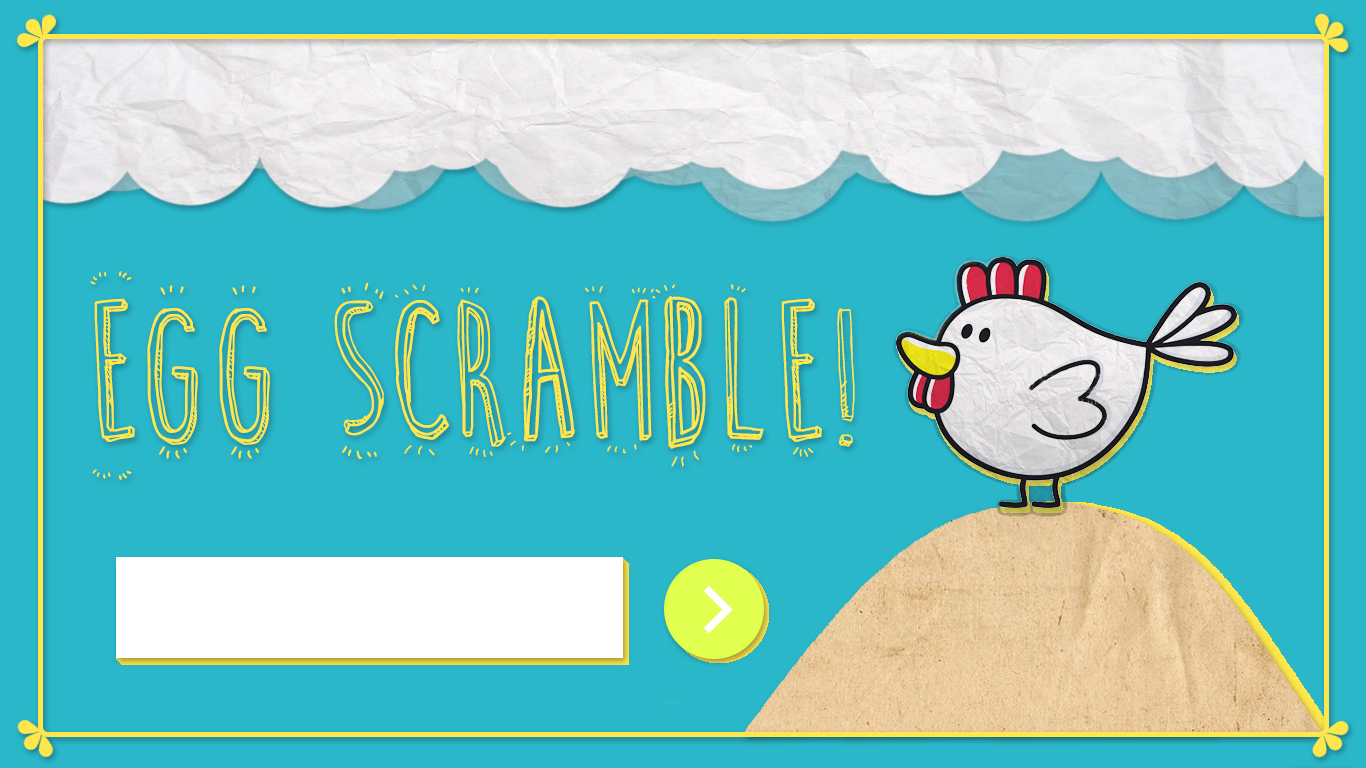
<style>
.page{position:relative;width:1366px;height:768px;background:#2ab7ca}
.page>*{position:absolute;margin:0}
.t1{font:200px "CuteCartoon";color:#fde74c}
</style>
<div class="page">
<p class="t1" style="left:90px;top:271px;width:765px;height:209px">Egg Scramble!</p>
</div>
